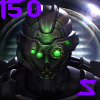
<style>
.page{position:relative;width:100px;height:100px}
.page>*{position:absolute;margin:0}
.t1{font:24px "StarcraftNormal";color:#8300fe}
.t2{font:22px "StarcraftNormal";color:#8300fe}
</style>
<div class="page">
<p class="t1" style="left:0px;top:0px;width:41px;height:20px">150</p>
<p class="t2" style="left:76px;top:80px;width:21px;height:15px">S</p>
</div>
